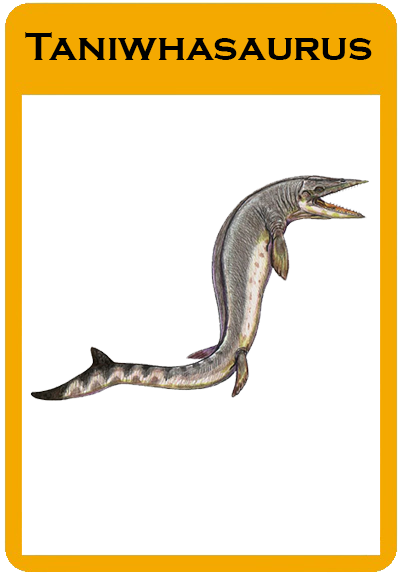
<style>
.page{position:relative;width:400px;height:575px;background:#ffffff}
.page>*{position:absolute;margin:0}
.t1{font:40px "CopperplateGothic-Bold";color:#000000}
</style>
<div class="page">
<p class="t1" style="left:25px;top:32px;width:347px;height:28px">Taniwhasaurus</p>
</div>
